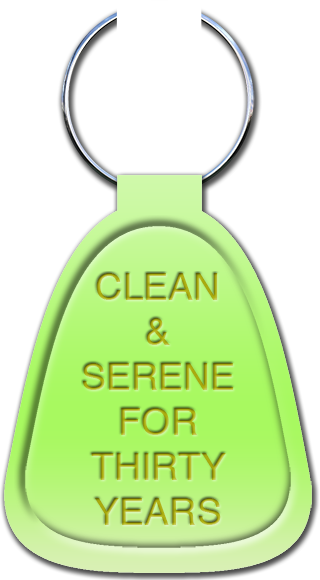
<style>
.page{position:relative;width:320px;height:580px;background:#ffffff}
.page>*{position:absolute;margin:0}
.t1{font:37.5px "Helvetica"}
</style>
<div class="page">
<p class="t1" style="left:83px;top:273px;width:151px;height:252px;text-align:center">CLEAN<br>&amp;<br>SERENE<br>FOR<br>THIRTY<br>YEARS</p>
</div>
